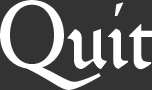
<style>
.page{position:relative;width:152px;height:90px;background:#333333}
.page>*{position:absolute;margin:0}
.t1{font:95.8px "Hamlet-Tertia18";color:#ffffff}
</style>
<div class="page">
<p class="t1" style="left:0px;top:0px;width:152px;height:90px">Quit</p>
</div>
